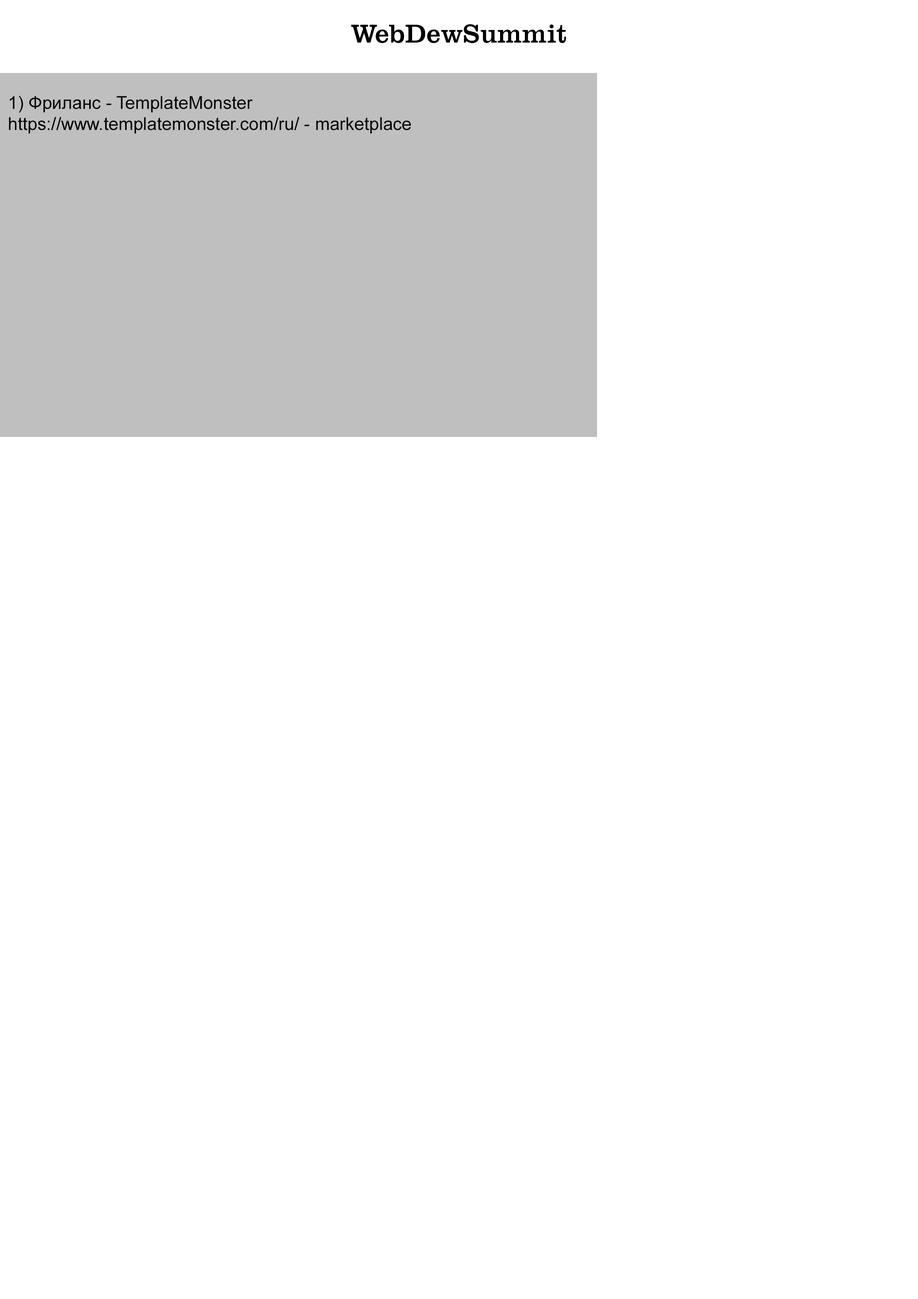
<style>
.page{position:relative;width:918px;height:1299px;background:#ffffff}
.page>*{position:absolute;margin:0}
.t1{font:26.7px "ClarendonBT-Roman";color:#010000}
.t2{font:17.8px "ArialMT";color:#000000}
</style>
<div class="page">
<p class="t1" style="left:351px;top:24px;width:215px;height:19px">WebDewSummit</p>
<p class="t2" style="left:9px;top:96px;width:402px;height:38px">1) Фриланс - TemplateMonster<br>https://www.templatemonster.com/ru/ - marketplace</p>
</div>
